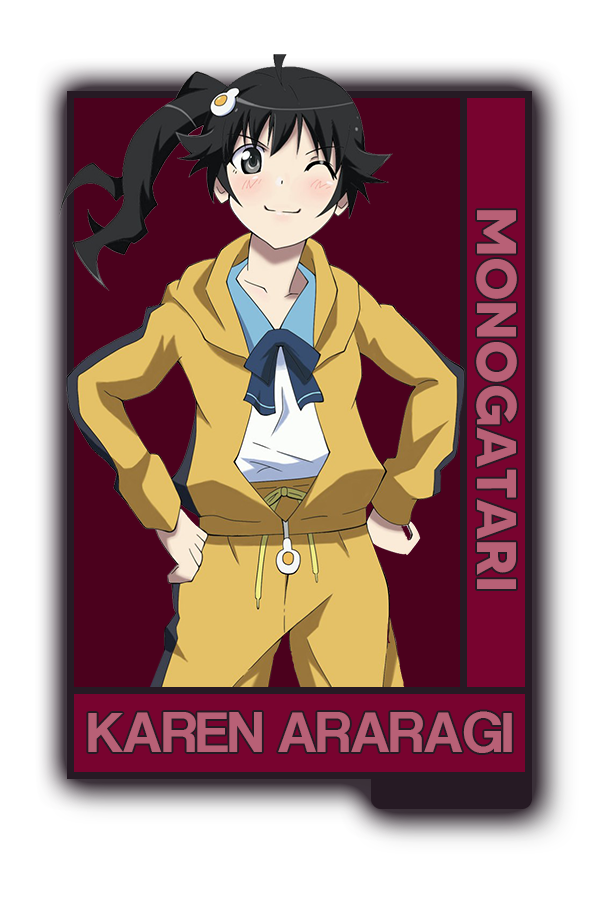
<style>
.page{position:relative;width:600px;height:900px;background:#ffffff}
.page>*{position:absolute;margin:0}
.t1{font:55.8px "MADETOMMY-Bold";color:#b86076}
.t2{font:59.9px "CoolveticaRg-Regular";color:#b86076}
</style>
<div class="page">
<p class="t1" style="left:476px;top:210px;width:41px;height:379px;rotate:90deg">MONOGATARI</p>
<p class="t2" style="left:88px;top:711px;width:424px;height:42px">KAREN ARARAGI</p>
</div>
